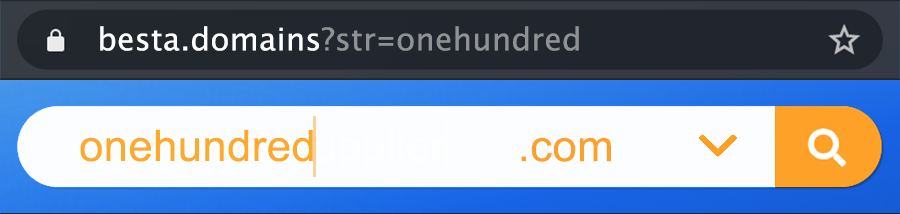
<style>
.page{position:relative;width:900px;height:214px;background:#fcfdfe}
.page>*{position:absolute;margin:0}
.t1{font:31px "LucidaGrande";letter-spacing:0.01em;color:#ffffff}
.t2{font:31px "LucidaGrande";letter-spacing:0.01em;color:#909192}
.t3{font:31px "LucidaGrande-Bold";letter-spacing:0.01em;color:#909192;scale:0.8 1}
.t4{font:43.5px "ArialMT";letter-spacing:0.01em;color:#fda929}
.t5{font:43.6px "ArialMT";letter-spacing:0.01em;color:#fda128}
</style>
<div class="page">
<p class="t1" style="left:100px;top:26px;width:479px;height:25px">besta.domains<span class="t2">?str</span><span class="t3">=</span><span class="t2">onehundred</span></p>
<p class="t4" style="left:80px;top:129px;width:233px;height:33px">onehundred</p>
<p class="t5" style="left:521px;top:137px;width:90px;height:25px">.com</p>
</div>
